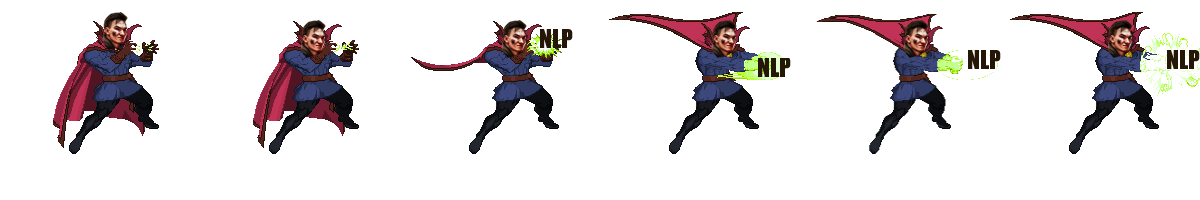
<style>
.page{position:relative;width:1200px;height:200px;background:#ffffff}
.page>*{position:absolute;margin:0}
.t1{font:24px "Impact";color:#241707}
</style>
<div class="page">
<p class="t1" style="left:540px;top:29px;width:33px;height:19px">NLP</p>
</div>
